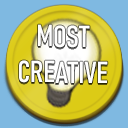
<style>
.page{position:relative;width:128px;height:128px;background:#7fb9e1}
.page>*{position:absolute;margin:0}
.t1{font:30px "Bahnschrift-Condensed";color:#ffffff}
</style>
<div class="page">
<p class="t1" style="left:19px;top:24px;width:89px;height:59px;text-align:center">MOST CREATIVE</p>
</div>
